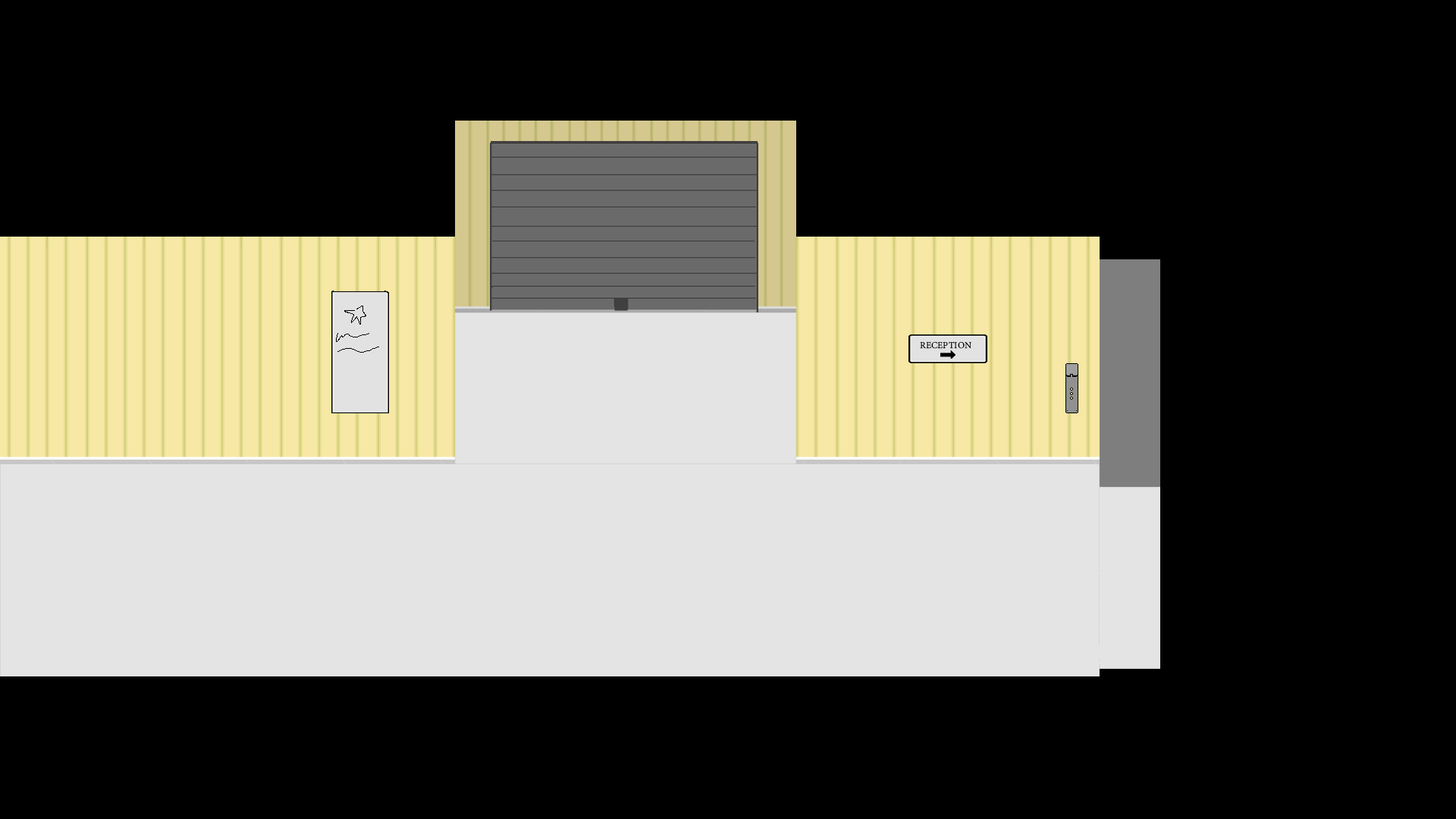
<style>
.page{position:relative;width:1456px;height:819px;background:#000000}
.page>*{position:absolute;margin:0}
.t1{font:9.1px "MinionVariableConcept-Roman";color:#000000}
</style>
<div class="page">
<p class="t1" style="left:920px;top:341px;width:51px;height:8px">RECEPTION</p>
</div>
